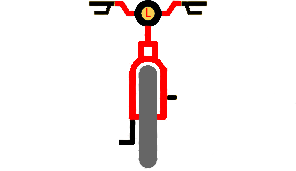
<style>
.page{position:relative;width:296px;height:171px;background:#ffffff}
.page>*{position:absolute;margin:0}
.t1{font:12.3px "MyriadPro-Regular";color:#ff0000}
</style>
<div class="page">
<p class="t1" style="left:146px;top:8px;width:5px;height:9px">L</p>
</div>
